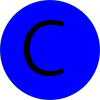
<style>
.page{position:relative;width:100px;height:100px;background:#0000ff}
.page>*{position:absolute;margin:0}
.t1{font:75px "MalgunGothicRegular";color:#000000}
</style>
<div class="page">
<p class="t1" style="left:23px;top:20px;width:41px;height:56px">C</p>
</div>
